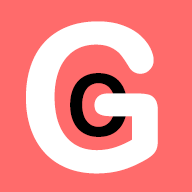
<style>
.page{position:relative;width:192px;height:192px;background:#ff6b6b}
.page>*{position:absolute;margin:0}
.t1{font:205px "ArialRoundedMTBold";letter-spacing:0.025em;color:#ffffff;scale:0.94 1}
.t2{font:86px "ArialRoundedMTBold";letter-spacing:0.025em;color:#000000;scale:0.94 1}
</style>
<div class="page">
<p class="t1" style="left:26px;top:21px;width:132px;height:153px">G</p>
<p class="t2" style="left:70px;top:73px;width:57px;height:64px">O</p>
</div>
